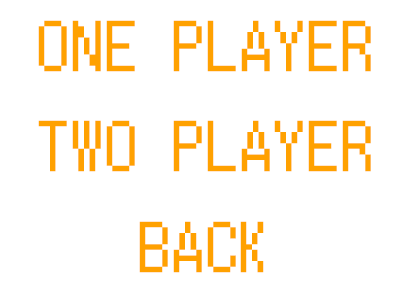
<style>
.page{position:relative;width:400px;height:300px;background:#ffffff}
.page>*{position:absolute;margin:0}
.t1{font:72px "Terminal";color:#ffa200}
</style>
<div class="page">
<p class="t1" style="left:38px;top:20px;width:333px;height:52px">ONE PLAYER</p>
<p class="t1" style="left:38px;top:120px;width:333px;height:52px">TWO PLAYER</p>
<p class="t1" style="left:139px;top:221px;width:125px;height:52px">BACK</p>
</div>
